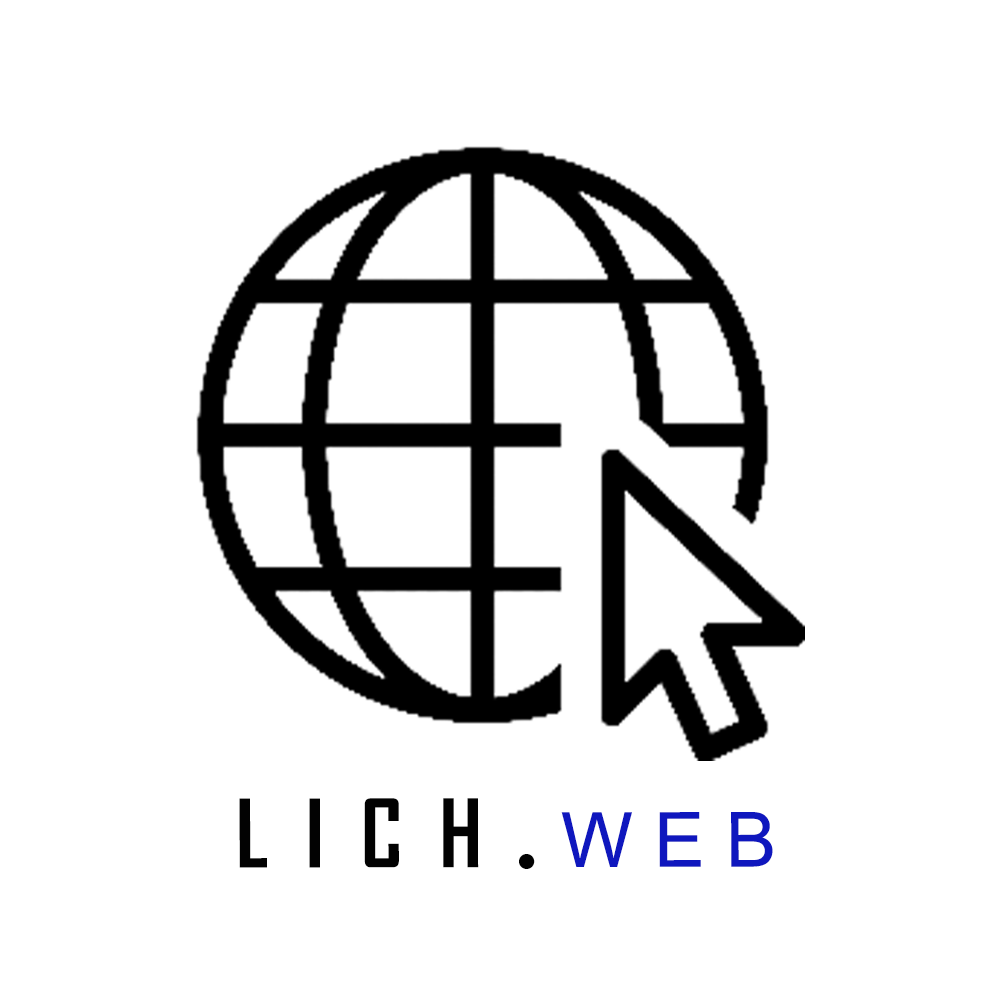
<style>
.page{position:relative;width:1000px;height:1000px;background:#ffffff}
.page>*{position:absolute;margin:0}
.t1{font:90px "AgencyFB-Bold";letter-spacing:0.1em;color:#020202;text-transform:uppercase}
.t2{font:69px "Arial-Black";color:#020202}
.t3{font:72px "GoudyStout";color:#020202}
.t4{font:76px "ArialMT";color:#0f17be}
</style>
<div class="page">
<p class="t1" style="left:239px;top:798px;width:534px;height:71px"><span class="t2"> </span>L I C H <span class="t3">. </span><span class="t4">W E B</span></p>
</div>
